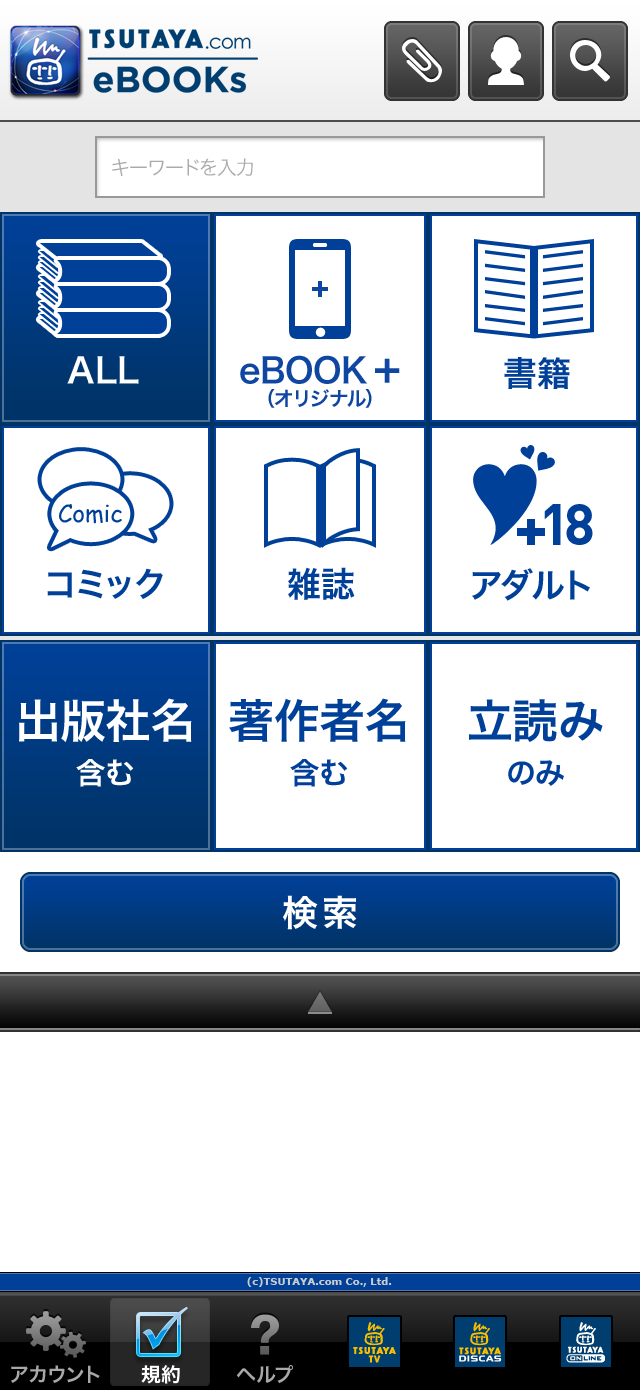
<style>
.page{position:relative;width:640px;height:1390px;background:#ffffff}
.page>*{position:absolute;margin:0}
.t1{font:20px "HiraKakuPro-W3";letter-spacing:-0.04em;color:#aaaaaa}
.t2{font:34px "HiraKakuPro-W6";color:#ffffff}
.t3{font:20px/24px "HiraKakuPro-W6";color:#0f46a1}
.t4{font:34px/24px "HiraKakuPro-W6";color:#0f46a1}
.t5{font:41px/24px "HiraKakuPro-W6";color:#0f46a1}
.t6{font:34px "HiraKakuPro-W6";color:#004098}
.t7{font:24px "ComicSansMS";color:#004098}
.t8{font:57px "DIN-Bold";letter-spacing:0.1em;color:#004098}
.t9{font:46px/46px "HiraKakuPro-W6";color:#ffffff}
.t10{font:30px/46px "HiraKakuPro-W6";color:#ffffff}
.t11{font:46px/46px "HiraKakuPro-W6";color:#004098}
.t12{font:30px/46px "HiraKakuPro-W6";color:#004098}
.t13{font:36px "HiraKakuPro-W6";letter-spacing:0.1em;color:#ffffff}
.t14{font:26px "HiraKakuPro-W6";color:#676767}
.t15{font:10px "Verdana-Bold";color:#cccccc}
.t16{font:20px "HiraKakuPro-W6";color:#a8a8a8}
.t17{font:20px "HiraKakuPro-W6";color:#ffffff}
</style>
<div class="page">
<p class="t1" style="left:112px;top:158px;width:141px;height:18px">キーワードを入力</p>
<p class="t2" style="left:67px;top:356px;width:72px;height:28px">ALL</p>
<p class="t2" style="left:67px;top:356px;width:72px;height:28px">ALL</p>
<p class="t3" style="left:240px;top:355px;width:160px;height:53px;text-align:center"><span class="t4">eBOOK </span><span class="t5">+<br></span>（オリジナル）</p>
<p class="t6" style="left:504px;top:357px;width:66px;height:32px">書籍</p>
<p class="t7" style="left:59px;top:504px;width:63px;height:20px">Comic</p>
<p class="t8" style="left:544px;top:504px;width:49px;height:41px">18</p>
<p class="t6" style="left:47px;top:568px;width:116px;height:31px">コミック</p>
<p class="t6" style="left:288px;top:567px;width:67px;height:33px">雑誌</p>
<p class="t6" style="left:472px;top:568px;width:118px;height:33px">アダルト</p>
<p class="t9" style="left:19px;top:698px;width:173px;height:89px;text-align:center">出版社名<br><span class="t10">含む</span></p>
<p class="t11" style="left:229px;top:698px;width:177px;height:89px;text-align:center">著作者名<br><span class="t12">含む</span></p>
<p class="t11" style="left:469px;top:699px;width:134px;height:87px;text-align:center">立読み<br><span class="t12">のみ</span></p>
<p class="t13" style="left:283px;top:895px;width:74px;height:35px">検索</p>
<p class="t14" style="left:308px;top:991px;width:24px;height:21px">▼</p>
<p class="t15" style="left:247px;top:1277px;width:145px;height:10px">(c)TSUTAYA.com Co., Ltd.</p>
<p class="t16" style="left:10px;top:1365px;width:90px;height:18px">アカウント</p>
<p class="t17" style="left:141px;top:1365px;width:39px;height:19px">規約</p>
<p class="t16" style="left:236px;top:1365px;width:57px;height:19px">ヘルプ</p>
</div>
